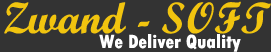
<style>
.page{position:relative;width:271px;height:52px;background:#333333}
.page>*{position:absolute;margin:0}
.t1{font:44px "ScriptMTBold";color:#f1c40f}
.t2{font:20px "TwCenMT-CondensedExtraBold";color:#ffffff}
</style>
<div class="page">
<p class="t1" style="left:4px;top:1px;width:267px;height:33px">Zwand - SOFT</p>
<p class="t2" style="left:99px;top:34px;width:142px;height:18px">We Deliver Quality</p>
</div>
